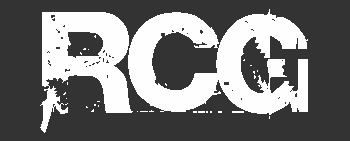
<style>
.page{position:relative;width:350px;height:141px;background:#333333}
.page>*{position:absolute;margin:0}
.t1{font:125px "Base02";color:#fefefe}
</style>
<div class="page">
<p class="t1" style="left:40px;top:9px;width:268px;height:124px">RCG</p>
</div>
